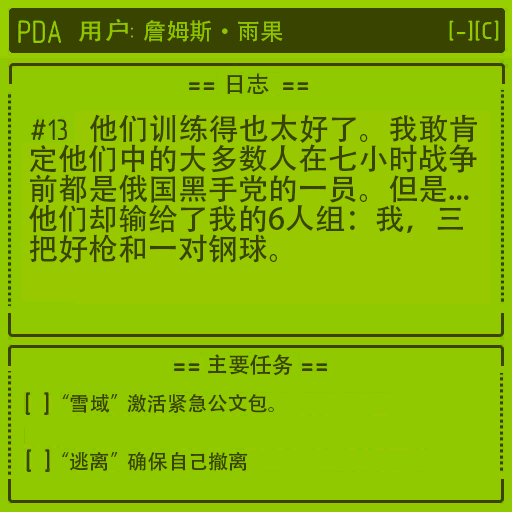
<style>
.page{position:relative;width:512px;height:512px;background:#90c900}
.page>*{position:absolute;margin:0}
.t1{font:30px/30px "AdobeHeitiStd-Regular";color:#384400}
</style>
<div class="page">
<p class="t1" style="left:29px;top:114px;width:448px;height:149px">他们训练得也太好了。我敢肯<br>定他们中的大多数人在七小时战争<br>前都是俄国黑手党的一员。但是...<br>他们却输给了我的6人组：我，三<br>把好枪和一对钢球。</p>
</div>
